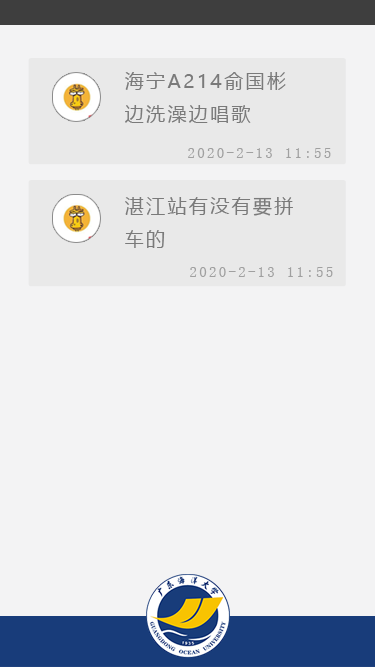
<style>
.page{position:relative;width:375px;height:667px;background:#f3f3f4}
.page>*{position:absolute;margin:0}
.t1{font:18.7px "MicrosoftYaHei";letter-spacing:0.14em;color:#7a7a7a}
.t2{font:15.2px "NSimSun";letter-spacing:0.14em;color:#a0a0a0}
</style>
<div class="page">
<p class="t1" style="left:125px;top:72px;width:161px;height:51px">海宁A214俞国彬<br>边洗澡边唱歌</p>
<p class="t2" style="left:188px;top:148px;width:143px;height:10px">2020-2-13 11:55</p>
<p class="t1" style="left:125px;top:197px;width:168px;height:51px">湛江站有没有要拼<br>车的</p>
<p class="t2" style="left:190px;top:267px;width:143px;height:10px">2020-2-13 11:55</p>
</div>
